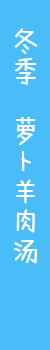
<style>
.page{position:relative;width:50px;height:350px;background:#4abdf9}
.page>*{position:absolute;margin:0}
.t1{font:30px/30px "-";color:#ffffff}
</style>
<div class="page">
<p class="t1" style="left:14px;top:28px;width:24px;height:236px">冬<br>季<br><br>萝<br>卜<br>羊<br>肉<br>汤</p>
</div>
